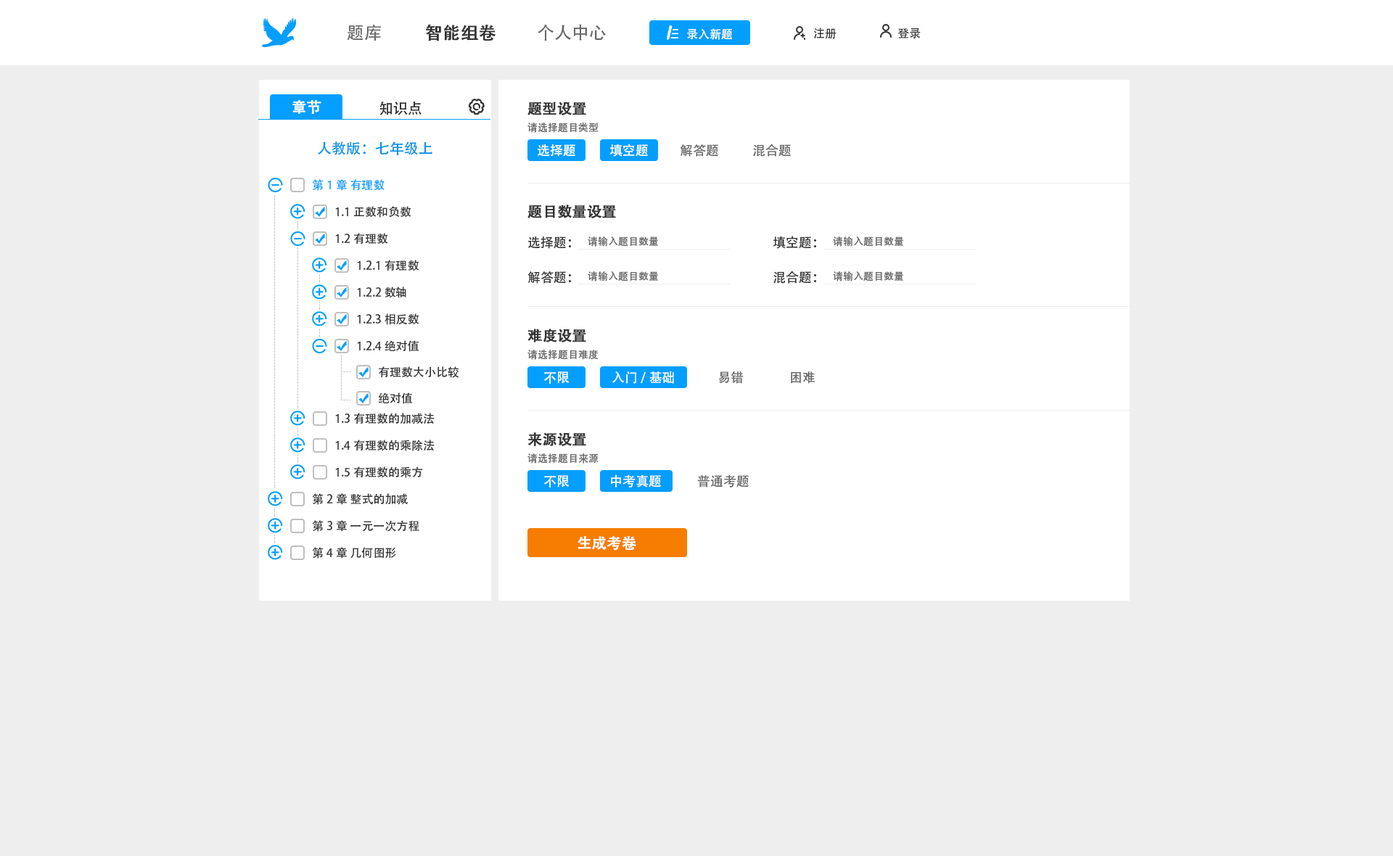
<style>
.page{position:relative;width:1393px;height:856px;background:#eeeeee}
.page>*{position:absolute;margin:0}
.t1{font:17.4px "AdobeHeitiStd-Regular";color:#666666}
.t2{font:17.4px "AdobeHeitiStd-Regular";color:#333333;font-weight:bold}
.t3{font:11.6px "AdobeHeitiStd-Regular";color:#ffffff}
.t4{font:11.6px "AdobeHeitiStd-Regular";color:#333333}
.t5{font:14.5px "AdobeHeitiStd-Regular";color:#ffffff;font-weight:bold}
.t6{font:14.5px "AdobeHeitiStd-Regular";color:#333333}
.t7{font:14.5px "AdobeHeitiStd-Regular";color:#333333;font-weight:bold}
.t8{font:10.2px "AdobeHeitiStd-Regular";color:#666666}
.t9{font:14.5px "AdobeHeitiStd-Regular";color:#0091ec}
.t10{font:13.1px "AdobeHeitiStd-Regular";color:#ffffff}
.t11{font:13.1px "AdobeHeitiStd-Regular";color:#666666}
.t12{font:11.6px "AdobeHeitiStd-Regular";color:#049eff}
.t13{font:13.1px "AdobeHeitiStd-Regular";color:#333333}
</style>
<div class="page">
<p class="t1" style="left:347px;top:25px;width:34px;height:16px">题库</p>
<p class="t2" style="left:426px;top:24px;width:70px;height:17px">智能组卷</p>
<p class="t1" style="left:538px;top:24px;width:68px;height:17px">个人中心</p>
<p class="t3" style="left:687px;top:28px;width:45px;height:12px">录入新题</p>
<p class="t4" style="left:813px;top:28px;width:23px;height:11px">注册</p>
<p class="t4" style="left:897px;top:28px;width:24px;height:11px">登录</p>
<p class="t5" style="left:292px;top:100px;width:29px;height:14px">章节</p>
<p class="t6" style="left:379px;top:101px;width:43px;height:14px">知识点</p>
<p class="t7" style="left:527px;top:102px;width:59px;height:13px">题型设置</p>
<p class="t8" style="left:527px;top:122px;width:72px;height:11px">请选择题目类型</p>
<p class="t9" style="left:318px;top:141px;width:114px;height:14px">人教版：七年级上</p>
<p class="t10" style="left:538px;top:144px;width:37px;height:13px">选择题</p>
<p class="t10" style="left:610px;top:144px;width:38px;height:13px">填空题</p>
<p class="t11" style="left:680px;top:144px;width:38px;height:13px">解答题</p>
<p class="t11" style="left:753px;top:144px;width:38px;height:13px">混合题</p>
<p class="t12" style="left:312px;top:179px;width:73px;height:12px">第1章 有理数</p>
<p class="t4" style="left:335px;top:206px;width:76px;height:12px">1.1正数和负数</p>
<p class="t7" style="left:527px;top:205px;width:89px;height:13px">题目数量设置</p>
<p class="t4" style="left:335px;top:233px;width:53px;height:11px">1.2有理数</p>
<p class="t13" style="left:528px;top:236px;width:43px;height:13px">选择题：</p>
<p class="t8" style="left:588px;top:237px;width:70px;height:10px">请输入题目数量</p>
<p class="t13" style="left:773px;top:236px;width:43px;height:13px">填空题：</p>
<p class="t8" style="left:833px;top:237px;width:70px;height:10px">请输入题目数量</p>
<p class="t4" style="left:357px;top:260px;width:62px;height:11px">1.2.1有理数</p>
<p class="t13" style="left:527px;top:271px;width:44px;height:13px">解答题：</p>
<p class="t8" style="left:588px;top:271px;width:70px;height:10px">请输入题目数量</p>
<p class="t13" style="left:773px;top:271px;width:43px;height:13px">混合题：</p>
<p class="t8" style="left:833px;top:271px;width:70px;height:10px">请输入题目数量</p>
<p class="t4" style="left:357px;top:287px;width:49px;height:11px">1.2.2数轴</p>
<p class="t4" style="left:357px;top:313px;width:62px;height:12px">1.2.3相反数</p>
<p class="t7" style="left:527px;top:329px;width:59px;height:13px">难度设置</p>
<p class="t4" style="left:357px;top:340px;width:62px;height:12px">1.2.4绝对值</p>
<p class="t8" style="left:527px;top:349px;width:72px;height:11px">请选择题目难度</p>
<p class="t4" style="left:379px;top:366px;width:80px;height:12px">有理数大小比较</p>
<p class="t10" style="left:544px;top:371px;width:26px;height:13px">不限</p>
<p class="t10" style="left:612px;top:371px;width:62px;height:13px">入门/基础</p>
<p class="t11" style="left:718px;top:371px;width:26px;height:13px">易错</p>
<p class="t11" style="left:791px;top:371px;width:24px;height:13px">困难</p>
<p class="t4" style="left:378px;top:392px;width:35px;height:12px">绝对值</p>
<p class="t4" style="left:335px;top:413px;width:100px;height:11px">1.3有理数的加减法</p>
<p class="t7" style="left:527px;top:432px;width:59px;height:14px">来源设置</p>
<p class="t4" style="left:335px;top:440px;width:100px;height:11px">1.4有理数的乘除法</p>
<p class="t8" style="left:527px;top:453px;width:72px;height:11px">请选择题目来源</p>
<p class="t4" style="left:335px;top:466px;width:88px;height:12px">1.5有理数的乘方</p>
<p class="t10" style="left:544px;top:475px;width:26px;height:13px">不限</p>
<p class="t10" style="left:611px;top:474px;width:50px;height:14px">中考真题</p>
<p class="t11" style="left:697px;top:474px;width:52px;height:14px">普通考题</p>
<p class="t4" style="left:312px;top:493px;width:96px;height:12px">第2章 整式的加减</p>
<p class="t4" style="left:312px;top:520px;width:107px;height:12px">第3章 一元一次方程</p>
<p class="t5" style="left:577px;top:535px;width:59px;height:16px">生成考卷</p>
<p class="t4" style="left:312px;top:547px;width:84px;height:12px">第4章 几何图形</p>
</div>
